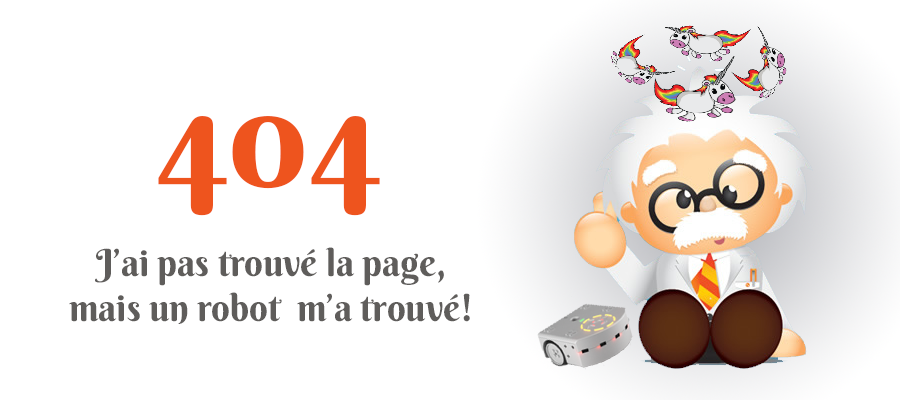
<style>
.page{position:relative;width:900px;height:400px;background:#ffffff}
.page>*{position:absolute;margin:0}
.t1{font:140px "BerkshireSwash-Regular";color:#ee541e}
.t2{font:37.4px "BerkshireSwash-Regular";color:#5f5d5b}
</style>
<div class="page">
<p class="t1" style="left:158px;top:116px;width:222px;height:100px">404</p>
<p class="t2" style="left:69px;top:247px;width:401px;height:77px;text-align:center">J’ai pas trouvé la page,<br>mais un robot  m’a trouvé!</p>
</div>
